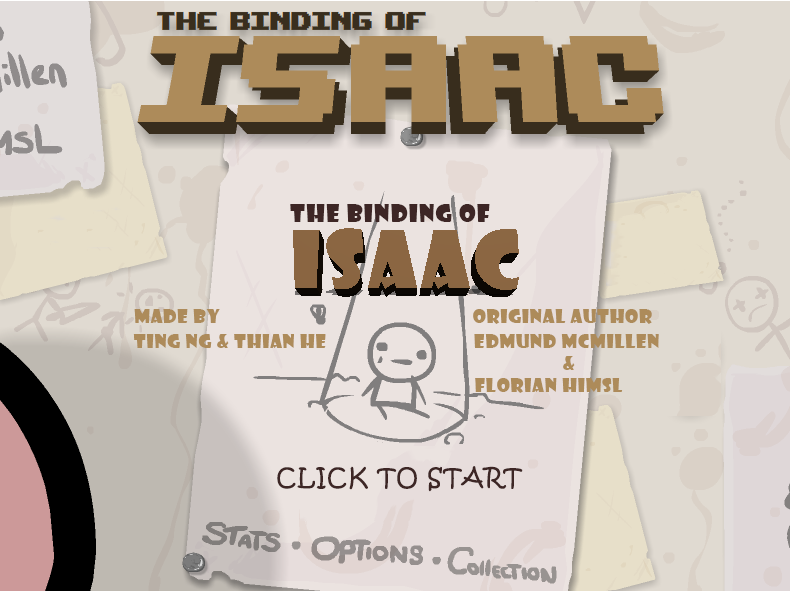
<style>
.page{position:relative;width:790px;height:591px}
.page>*{position:absolute;margin:0}
.t1{font:24px "ShowcardGothic-Reg";letter-spacing:0.05em;color:#3d2625}
.t2{font:18.7px "ShowcardGothic-Reg";letter-spacing:0.05em;color:#ad8b5a}
.t3{font:24px "KristenITC-Regular";letter-spacing:0.05em;color:#3d2625}
</style>
<div class="page">
<p class="t1" style="left:290px;top:204px;width:200px;height:18px">THE BINDING OF</p>
<p class="t2" style="left:134px;top:309px;width:86px;height:14px">MaDE BY</p>
<p class="t2" style="left:473px;top:309px;width:179px;height:15px">Original author</p>
<p class="t2" style="left:133px;top:334px;width:193px;height:14px">TING NG &amp; Thian he</p>
<p class="t2" style="left:474px;top:334px;width:185px;height:14px">Edmund mcmillen</p>
<p class="t2" style="left:563px;top:356px;width:12px;height:14px">&amp;</p>
<p class="t2" style="left:475px;top:378px;width:148px;height:15px">FLORIAN HIMSL</p>
<p class="t3" style="left:277px;top:466px;width:246px;height:26px">CLICK TO START</p>
</div>
